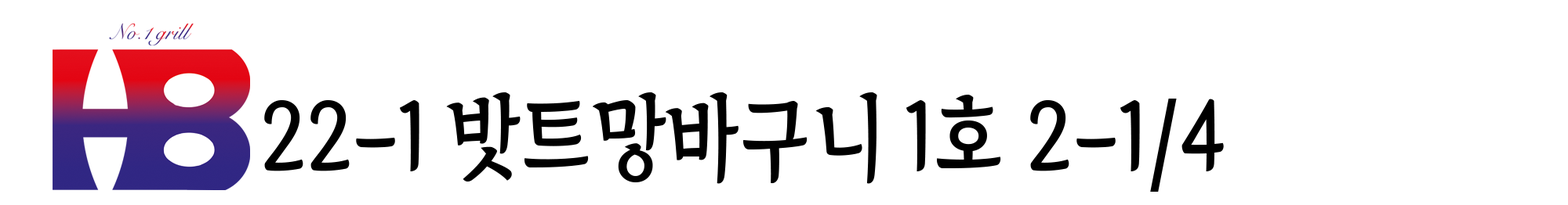
<style>
.page{position:relative;width:1568px;height:205px;background:#ffffff}
.page>*{position:absolute;margin:0}
.t1{font:93.7px "TheIndependenceHallofKorea-Regular";color:#000000;scale:0.89 1}
</style>
<div class="page">
<p class="t1" style="left:264px;top:93px;width:960px;height:99px">22-1 밧트망바구니 1호 2-1/4</p>
</div>
